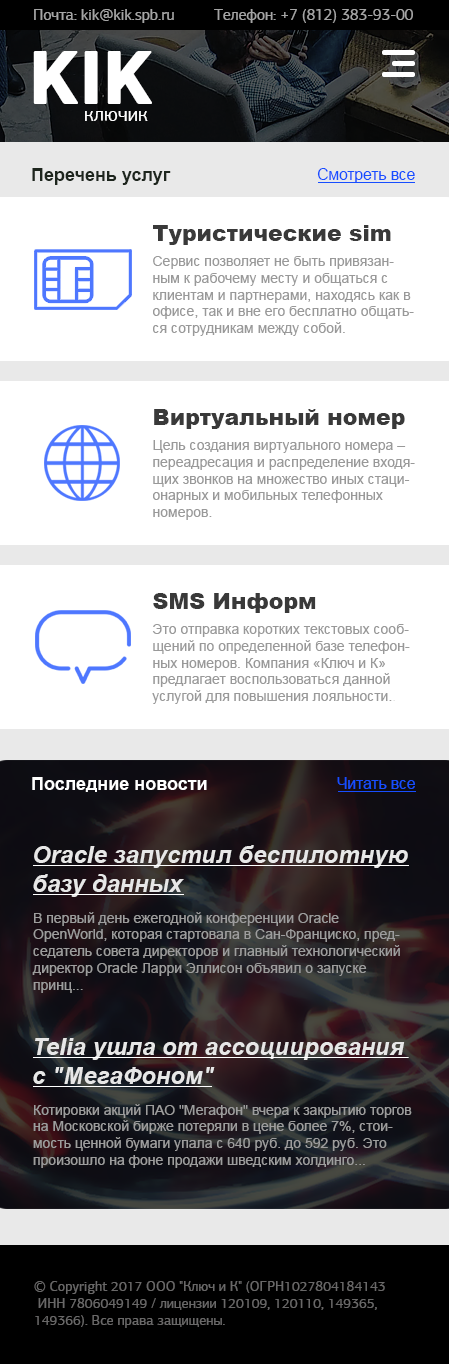
<style>
.page{position:relative;width:449px;height:1364px;background:#ffffff}
.page>*{position:absolute;margin:0}
.t1{font:15.6px "PFAgoraSansPro-Regular";color:#a5a5a5}
.t2{font:80px "PFSquareSansPro-Bold";color:#ffffff}
.t3{font:20px "PFAgoraSansPro-Regular";color:#ffffff}
.t4{font:18px "Arial-BoldMT";color:#1e261e}
.t5{font:15.6px "ArialMT";color:#174eff}
.t6{font:22px "Arial-Black";color:#393939}
.t7{font:14px "ArialMT";color:#999999}
.t8{font:18px "Arial-BoldMT";color:#ffffff}
.t9{font:24px "Arial-BoldItalicMT";color:#e7e7e7}
.t10{font:14px "ArialMT";color:#9d9d9d}
.t11{font:14px "PFAgoraSansPro-Regular";color:#696868}
</style>
<div class="page">
<p class="t1" style="left:34px;top:9px;width:140px;height:14px">Почта: kik@kik.spb.ru</p>
<p class="t1" style="left:214px;top:9px;width:199px;height:14px">Телефон: +7 (812) 383-93-00</p>
<p class="t2" style="left:33px;top:51px;width:119px;height:53px">KIK</p>
<p class="t3" style="left:85px;top:111px;width:63px;height:10px">ключик</p>
<p class="t4" style="left:32px;top:168px;width:139px;height:17px">Перечень услуг</p>
<p class="t5" style="left:317px;top:168px;width:98px;height:15px">Смотреть все</p>
<p class="t6" style="left:153px;top:225px;width:238px;height:20px">Туристические sim</p>
<p class="t7" style="left:153px;top:256px;width:261px;height:80px">Сервис позволяет не быть привязанным к рабочему месту и общаться с клиентам и партнерами, находясь как в офисе, так и вне его бесплатно общаться сотрудникам между собой.</p>
<p class="t6" style="left:154px;top:409px;width:251px;height:20px">Виртуальный номер</p>
<p class="t7" style="left:153px;top:440px;width:262px;height:80px">Цель создания виртуального номера – переадресация и распределение входящих звонков на множество иных стационарных и мобильных телефонных номеров.</p>
<p class="t6" style="left:153px;top:593px;width:163px;height:20px">SMS Информ</p>
<p class="t7" style="left:152px;top:624px;width:258px;height:80px">Это отправка коротких текстовых сообщений по определенной базе телефонных номеров. Компания «Ключ и К» предлагает воспользоваться данной услугой для повышения лояльности..</p>
<p class="t8" style="left:32px;top:777px;width:175px;height:15px">Последние новости</p>
<p class="t5" style="left:337px;top:777px;width:78px;height:12px">Читать все</p>
<p class="t9" style="left:33px;top:845px;width:375px;height:52px">Oracle запустил беспилотную базу данных</p>
<p class="t10" style="left:32px;top:912px;width:368px;height:81px">В первый день ежегодной конференции Oracle OpenWorld, которая стартовала в Сан-Франциско, председатель совета директоров и главный технологический директор Oracle Ларри Эллисон объявил о запуске принц...</p>
<p class="t9" style="left:33px;top:1038px;width:372px;height:46px">Telia ушла от ассоциирования с "МегаФоном"</p>
<p class="t10" style="left:33px;top:1104px;width:379px;height:64px">Котировки акций ПАО "Мегафон" вчера к закрытию торгов на Московской бирже потеряли в цене более 7%, стоимость ценной бумаги упала с 640 руб. до 592 руб. Это произошло на фоне продажи шведским холдинго...</p>
<p class="t11" style="left:34px;top:1281px;width:351px;height:47px">© Copyright 2017 ООО "Ключ и К" (ОГРН1027804184143 <br> ИНН 7806049149 / лицензии 120109, 120110, 149365, <br>149366). Все права защищены.</p>
</div>
